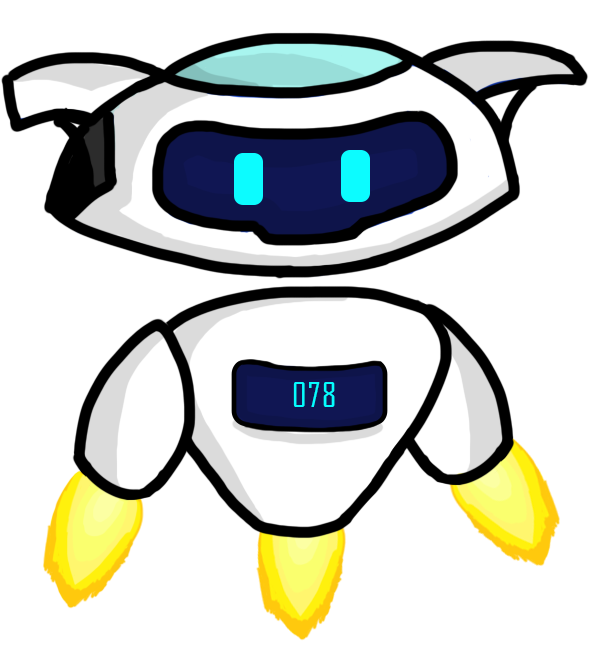
<style>
.page{position:relative;width:612px;height:665px;background:#ffffff}
.page>*{position:absolute;margin:0}
.t1{font:33.3px "AgencyFB-Reg";letter-spacing:0.06em;color:#05fcff}
</style>
<div class="page">
<p class="t1" style="left:293px;top:382px;width:42px;height:25px">078</p>
</div>
